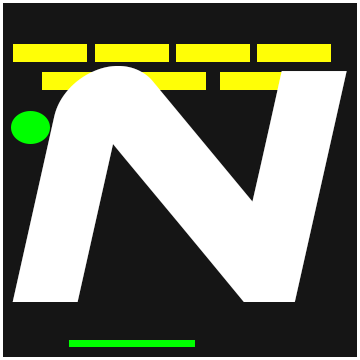
<style>
.page{position:relative;width:360px;height:360px;background:#151515}
.page>*{position:absolute;margin:0}
.t1{font:324.3px "Onky-Italic";letter-spacing:0.1em;color:#ffffff;scale:1.05 1}
</style>
<div class="page">
<p class="t1" style="left:12px;top:66px;width:335px;height:236px">N</p>
</div>
